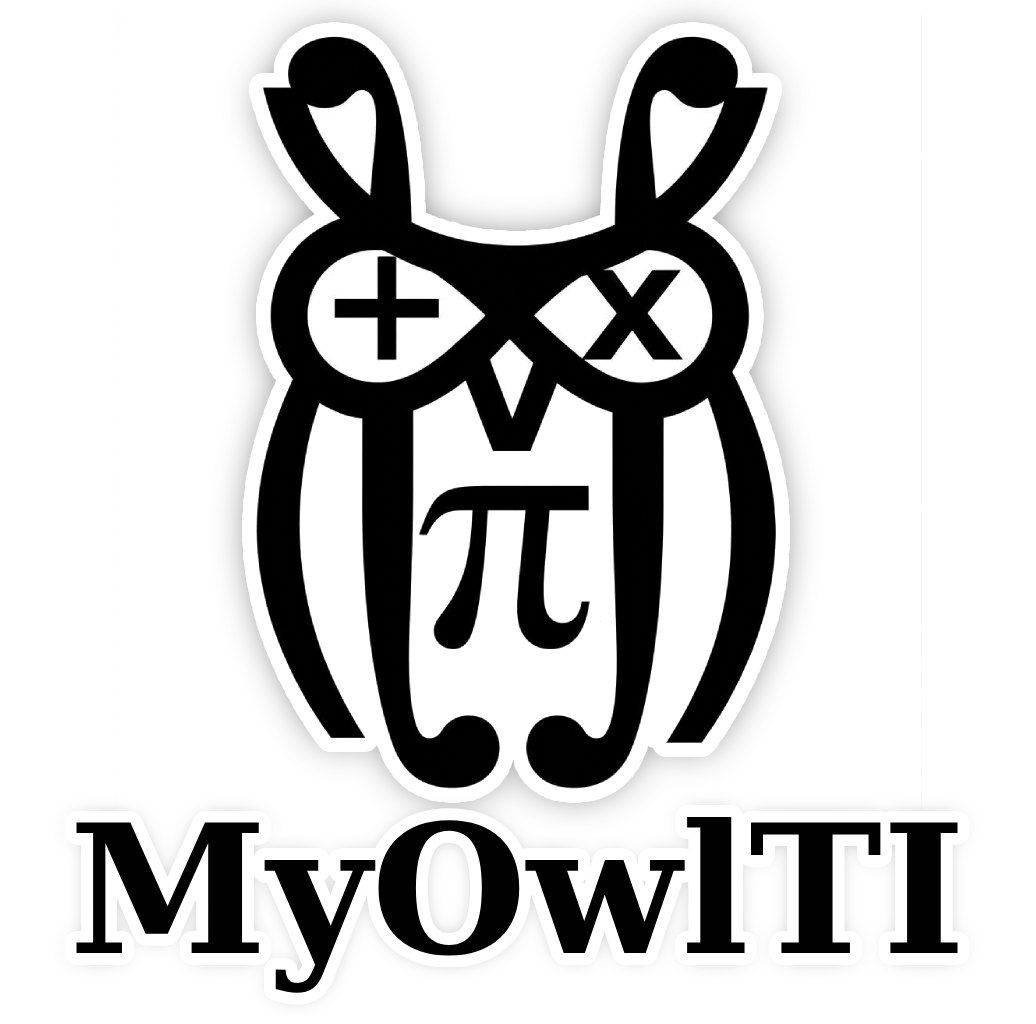
<style>
.page{position:relative;width:1036px;height:1024px;background:#ffffff}
.page>*{position:absolute;margin:0}
.t1{font:179px "DejaVuSerif-Bold";color:#010101}
</style>
<div class="page">
<p class="t1" style="left:76px;top:817px;width:882px;height:176px">MyOwlTI</p>
</div>
